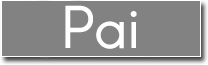
<style>
.page{position:relative;width:208px;height:65px;background:#828282}
.page>*{position:absolute;margin:0}
.t1{font:59px "Arcon-Regular";letter-spacing:-0.007em;color:#ffffff}
</style>
<div class="page">
<p class="t1" style="left:65px;top:5px;width:72px;height:44px">Pai</p>
</div>
